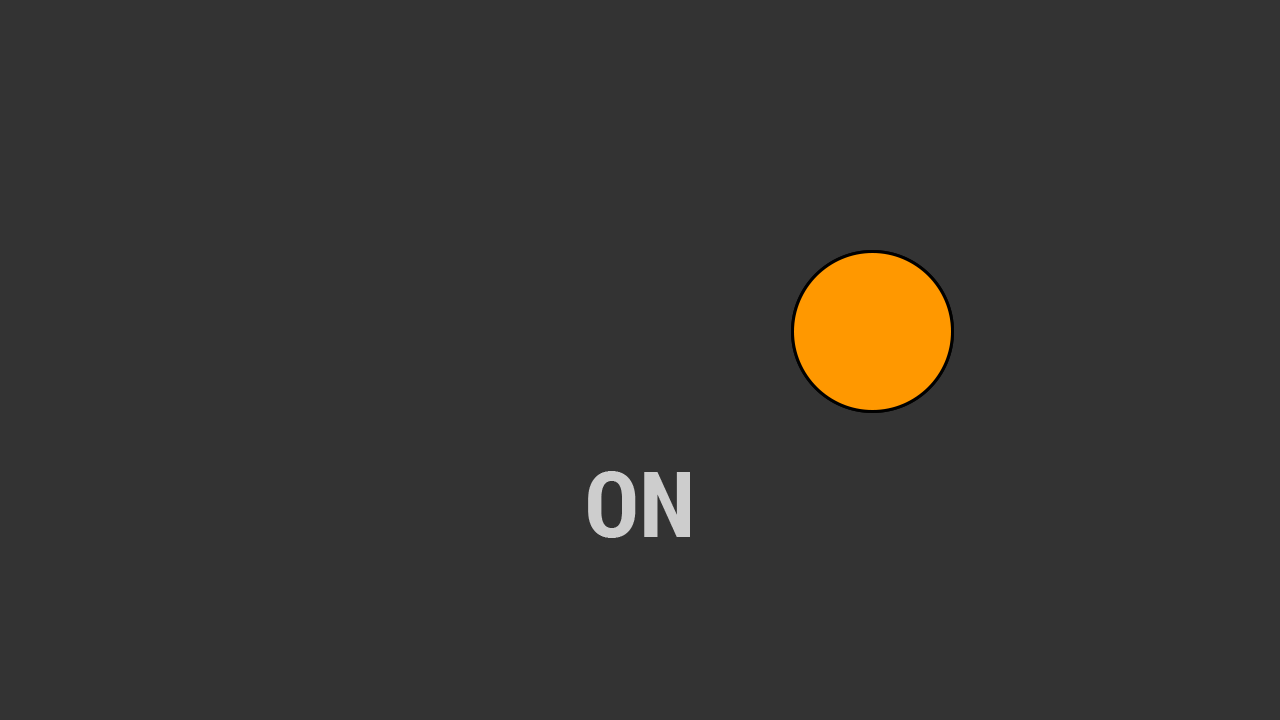
<style>
.page{position:relative;width:1280px;height:720px;background:#333333}
.page>*{position:absolute;margin:0}
.t1{font:92px "RobotoCondensed-Bold";color:#cdcdcd}
</style>
<div class="page">
<p class="t1" style="left:588px;top:471px;width:102px;height:67px">ON</p>
</div>
